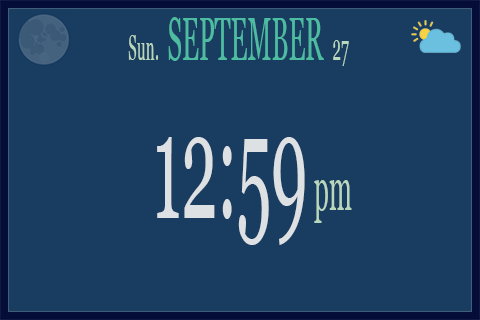
<style>
.page{position:relative;width:480px;height:320px;background:#193d61}
.page>*{position:absolute;margin:0}
.t1{font:60px "Georgia";color:#4ebca1;scale:0.43 1}
.t2{font:36px "Georgia";color:#b9d7bd;scale:0.43 1}
.t3{font:150px "Georgia";color:#dee1e4;scale:0.43 1}
.t4{font:60px "Georgia";color:#b9d7bd;scale:0.43 1}
</style>
<div class="page">
<p class="t1" style="left:168px;top:17px;width:156px;height:44px">SEPTEMBER</p>
<p class="t2" style="left:128px;top:35px;width:31px;height:25px">Sun.</p>
<p class="t2" style="left:333px;top:40px;width:16px;height:26px">27</p>
<p class="t3" style="left:157px;top:137px;width:148px;height:108px">12:59</p>
<p class="t4" style="left:314px;top:180px;width:38px;height:43px">pm</p>
</div>
